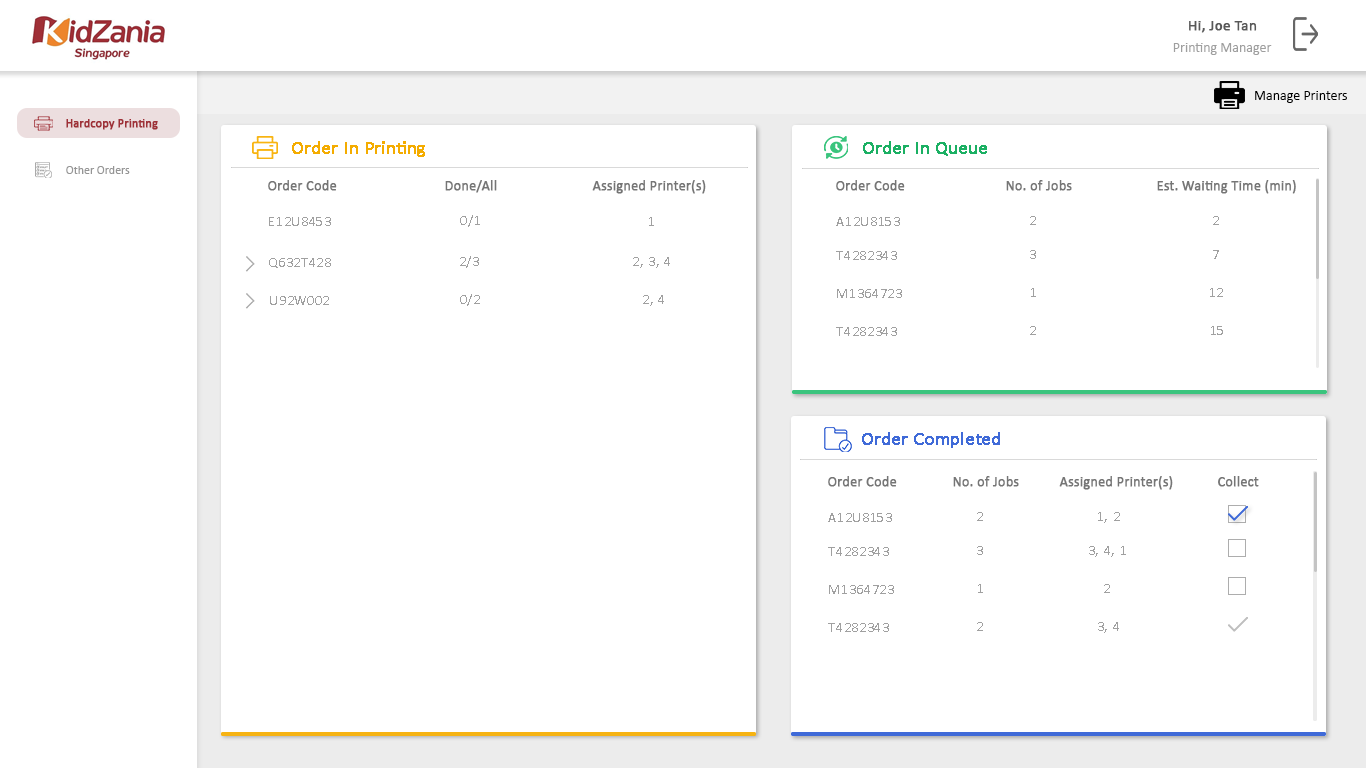
<style>
.page{position:relative;width:1366px;height:768px;background:#ffffff}
.page>*{position:absolute;margin:0}
.t1{font:15px "Calibri";color:#585858;font-weight:bold}
.t2{font:14px "Calibri";color:#9f9f9f}
.t3{font:14px "Calibri";color:#000000}
.t4{font:12px "Calibri";color:#9f3037;font-weight:bold}
.t5{font:18px "Calibri";color:#f4ac00;font-weight:bold}
.t6{font:18px "Calibri";color:#1bb063;font-weight:bold}
.t7{font:12px "Calibri";color:#959595}
.t8{font:14px "Calibri";color:#757575;font-weight:bold}
.t9{font:14px "Calibri";letter-spacing:0.05em;color:#a0a0a0}
.t10{font:18px "Calibri";color:#3f6ad8;font-weight:bold}
</style>
<div class="page">
<p class="t1" style="left:1189px;top:21px;width:68px;height:12px">Hi, Joe Tan</p>
<p class="t2" style="left:1173px;top:43px;width:99px;height:12px">Printing Manager</p>
<p class="t3" style="left:1255px;top:91px;width:92px;height:12px">Manage Printers</p>
<p class="t4" style="left:66px;top:119px;width:92px;height:11px">Hardcopy Printing</p>
<p class="t5" style="left:292px;top:141px;width:133px;height:16px">Order In Printing</p>
<p class="t6" style="left:863px;top:141px;width:124px;height:15px">Order In Queue</p>
<p class="t7" style="left:66px;top:166px;width:64px;height:8px">Other Orders</p>
<p class="t8" style="left:268px;top:180px;width:69px;height:11px">Order Code</p>
<p class="t8" style="left:445px;top:180px;width:52px;height:13px">Done/All</p>
<p class="t8" style="left:592px;top:180px;width:114px;height:14px">Assigned Printer(s)</p>
<p class="t8" style="left:836px;top:180px;width:69px;height:11px">Order Code</p>
<p class="t8" style="left:1006px;top:180px;width:66px;height:11px">No. of Jobs</p>
<p class="t8" style="left:1157px;top:180px;width:139px;height:14px">Est. Waiting Time (min)</p>
<p class="t9" style="left:269px;top:217px;width:62px;height:9px">E12U8453</p>
<p class="t9" style="left:460px;top:215px;width:20px;height:12px">0/1</p>
<p class="t9" style="left:649px;top:217px;width:5px;height:9px">1</p>
<p class="t9" style="left:836px;top:217px;width:64px;height:9px">A12U8153</p>
<p class="t9" style="left:1030px;top:216px;width:6px;height:9px">2</p>
<p class="t9" style="left:1213px;top:216px;width:6px;height:9px">2</p>
<p class="t9" style="left:460px;top:256px;width:19px;height:12px">2/3</p>
<p class="t9" style="left:633px;top:257px;width:37px;height:11px">2, 3, 4</p>
<p class="t9" style="left:836px;top:251px;width:61px;height:9px">T4282343</p>
<p class="t9" style="left:1030px;top:250px;width:6px;height:9px">3</p>
<p class="t9" style="left:1213px;top:250px;width:6px;height:9px">7</p>
<p class="t9" style="left:269px;top:258px;width:62px;height:10px">Q632T428</p>
<p class="t9" style="left:460px;top:294px;width:20px;height:12px">0/2</p>
<p class="t9" style="left:837px;top:289px;width:65px;height:9px">M1364723</p>
<p class="t9" style="left:1031px;top:288px;width:5px;height:9px">1</p>
<p class="t9" style="left:1210px;top:288px;width:13px;height:9px">12</p>
<p class="t9" style="left:270px;top:296px;width:59px;height:9px">U92W002</p>
<p class="t9" style="left:643px;top:295px;width:21px;height:11px">2, 4</p>
<p class="t9" style="left:836px;top:327px;width:61px;height:9px">T4282343</p>
<p class="t9" style="left:836px;top:327px;width:61px;height:9px">T4282343</p>
<p class="t9" style="left:1030px;top:326px;width:6px;height:9px">2</p>
<p class="t9" style="left:1030px;top:326px;width:6px;height:9px">2</p>
<p class="t9" style="left:1211px;top:326px;width:12px;height:9px">15</p>
<p class="t10" style="left:862px;top:432px;width:138px;height:16px">Order Completed</p>
<p class="t8" style="left:828px;top:476px;width:69px;height:11px">Order Code</p>
<p class="t8" style="left:953px;top:476px;width:66px;height:11px">No. of Jobs</p>
<p class="t8" style="left:1059px;top:476px;width:114px;height:14px">Assigned Printer(s)</p>
<p class="t8" style="left:1218px;top:476px;width:41px;height:11px">Collect</p>
<p class="t9" style="left:828px;top:513px;width:64px;height:9px">A12U8153</p>
<p class="t9" style="left:977px;top:512px;width:6px;height:9px">2</p>
<p class="t9" style="left:1098px;top:512px;width:22px;height:11px">1, 2</p>
<p class="t9" style="left:828px;top:547px;width:61px;height:9px">T4282343</p>
<p class="t9" style="left:977px;top:546px;width:6px;height:9px">3</p>
<p class="t9" style="left:1089px;top:546px;width:37px;height:11px">3, 4, 1</p>
<p class="t9" style="left:829px;top:585px;width:65px;height:9px">M1364723</p>
<p class="t9" style="left:978px;top:584px;width:5px;height:9px">1</p>
<p class="t9" style="left:1104px;top:584px;width:6px;height:9px">2</p>
<p class="t9" style="left:828px;top:623px;width:61px;height:9px">T4282343</p>
<p class="t9" style="left:828px;top:623px;width:61px;height:9px">T4282343</p>
<p class="t9" style="left:977px;top:622px;width:6px;height:9px">2</p>
<p class="t9" style="left:977px;top:622px;width:6px;height:9px">2</p>
<p class="t9" style="left:1098px;top:622px;width:21px;height:11px">3, 4</p>
</div>
